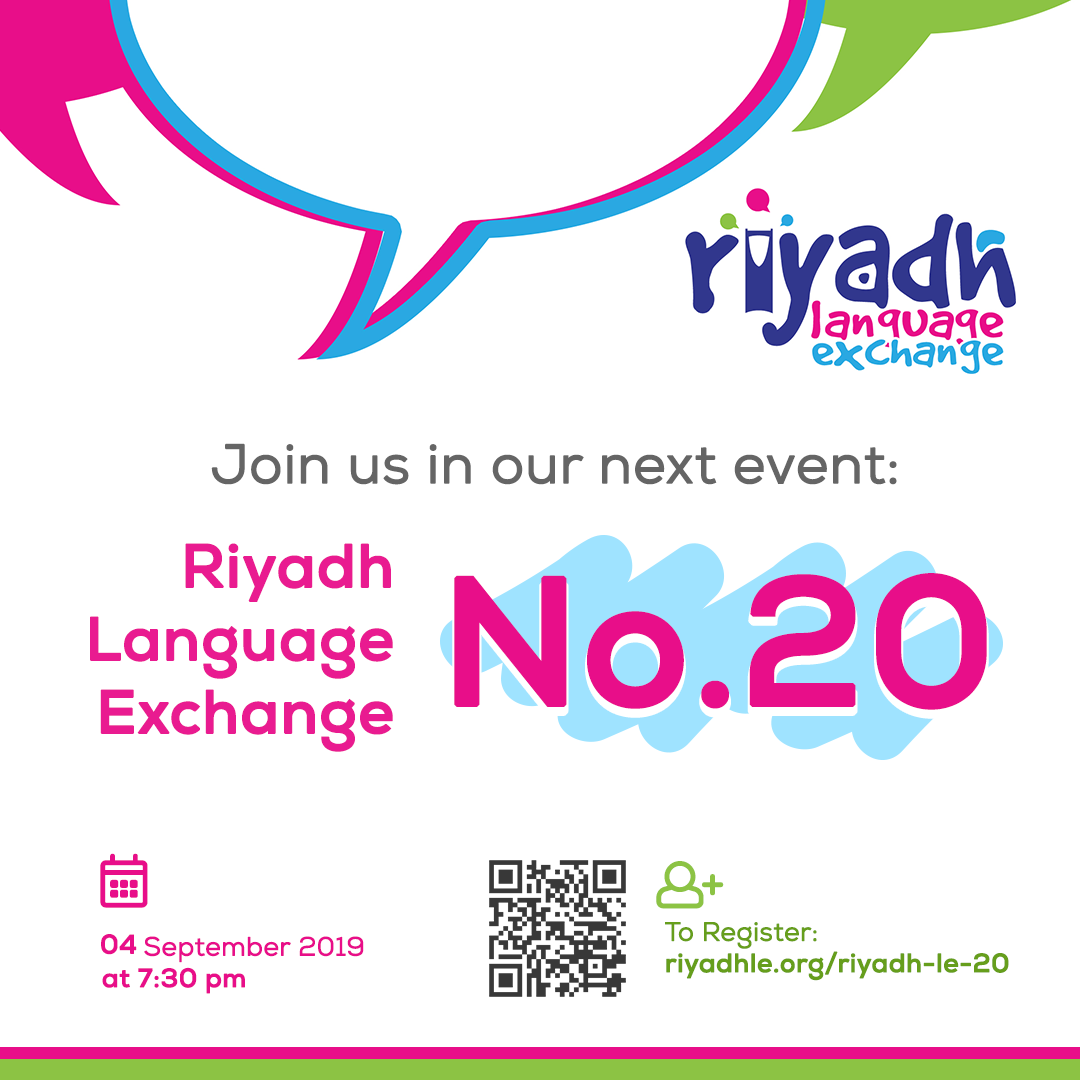
<style>
.page{position:relative;width:1080px;height:1080px;background:#ffffff}
.page>*{position:absolute;margin:0}
.t1{font:54.7px "Nexa-Book";color:#656565;font-weight:bold}
.t2{font:60.8px "Nexa-Bold";color:#e91b90;font-weight:bold}
.t3{font:180.2px "Nexa-Bold";color:#e80e89;font-weight:bold}
.t4{font:26.1px "Nexa-Bold";color:#669e1c;font-weight:bold}
.t5{font:26.1px "Nexa-Book";color:#669e1c;font-weight:bold}
.t6{font:26.6px "Nexa-Bold";color:#e80e89;font-weight:bold}
.t7{font:26.1px "Nexa-Book";color:#e80e89;font-weight:bold}
.t8{font:26.1px "Nexa-Bold";color:#e80e89;font-weight:bold}
</style>
<div class="page">
<p class="t1" style="left:211px;top:443px;width:686px;height:42px">:Join us in our next event</p>
<p class="t2" style="left:90px;top:543px;width:303px;height:209px">Riyadh<br>Language<br>Exchange</p>
<p class="t3" style="left:454px;top:573px;width:533px;height:137px">No.20</p>
<p class="t4" style="left:665px;top:922px;width:344px;height:59px;text-align:right"><span class="t5">:To Register<br></span>riyadhle.org/riyadh-le-20</p>
<p class="t6" style="left:101px;top:934px;width:36px;height:21px">04</p>
<p class="t7" style="left:144px;top:936px;width:220px;height:27px">2019 September</p>
<p class="t8" style="left:102px;top:967px;width:143px;height:27px">at 7:30 pm</p>
</div>
